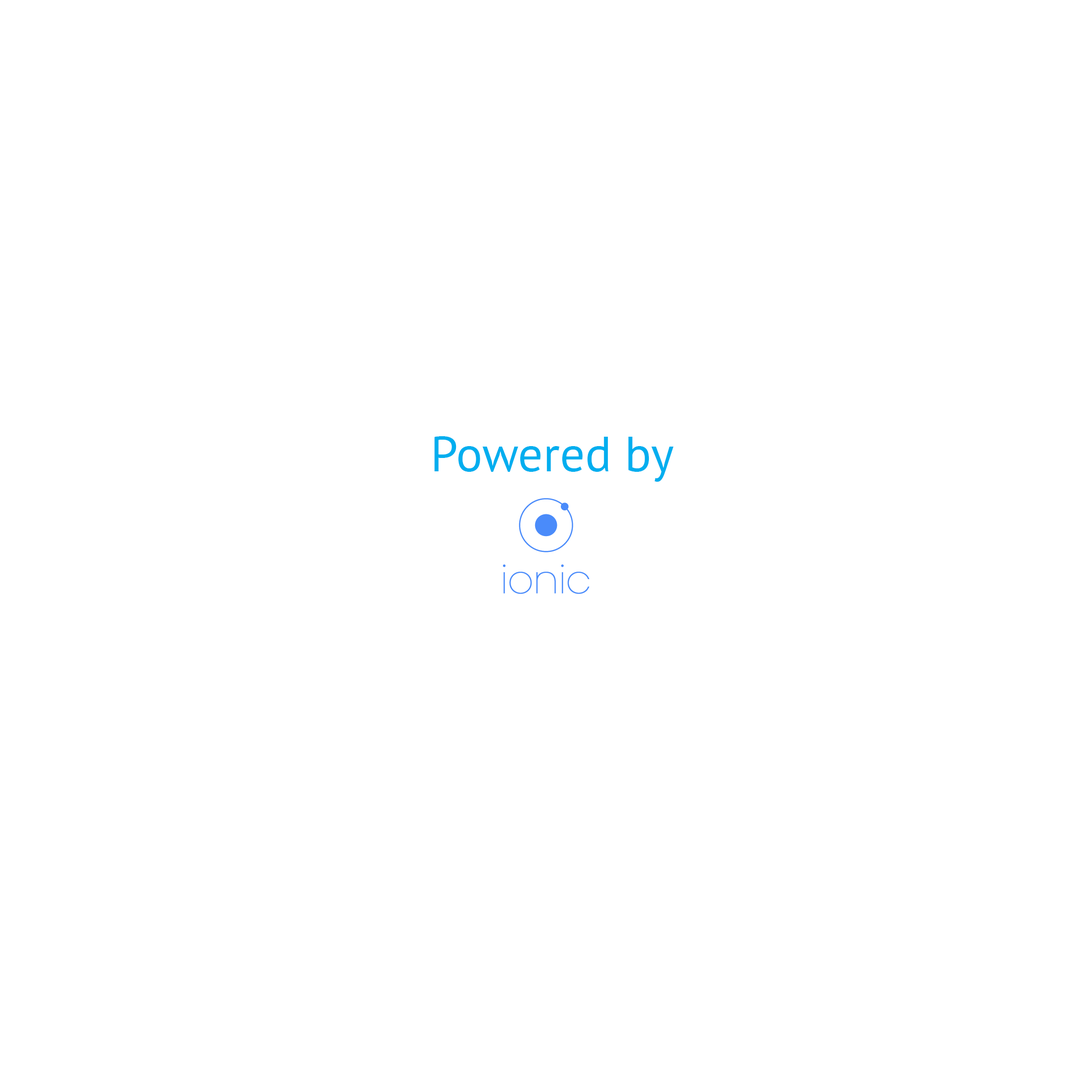
<style>
.page{position:relative;width:1092px;height:1092px;background:#ffffff}
.page>*{position:absolute;margin:0}
.t1{font:49.5px "PTSans-Regular";color:#00aeef}
</style>
<div class="page">
<p class="t1" style="left:434px;top:436px;width:240px;height:46px">Powered by</p>
</div>
